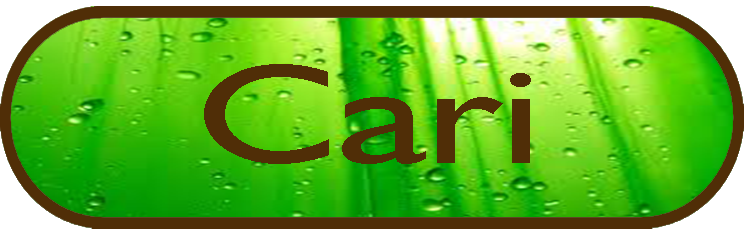
<style>
.page{position:relative;width:744px;height:233px}
.page>*{position:absolute;margin:0}
.t1{font:141.1px "Humanist521BT-Roman";color:#502e07;scale:1.43 1}
</style>
<div class="page">
<p class="t1" style="left:204px;top:64px;width:327px;height:100px">Cari</p>
</div>
